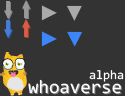
<style>
.page{position:relative;width:125px;height:96px;background:#333333}
.page>*{position:absolute;margin:0}
.t1{font:20.9px "ArialMT";color:#aaaaaa}
.t2{font:21px "ArialMT";color:#aaaaaa}
.t3{font:20.6px "ArialMT";color:#3c85fb;scale:1.03 1}
.t4{font:21.2px "ArialMT";color:#3c85fb}
.t5{font:12.5px "Consolas";color:#ffffff}
.t6{font:18.7px "Consolas";color:#ffffff}
</style>
<div class="page">
<p class="t1" style="left:41px;top:5px;width:16px;height:16px">►</p>
<p class="t2" style="left:67px;top:5px;width:15px;height:16px;rotate:90deg">►</p>
<p class="t3" style="left:41px;top:31px;width:16px;height:16px">►</p>
<p class="t4" style="left:67px;top:31px;width:15px;height:16px;rotate:90deg">►</p>
<p class="t5" style="left:89px;top:70px;width:35px;height:12px">alpha</p>
<p class="t6" style="left:28px;top:79px;width:93px;height:15px">whoaverse</p>
</div>
